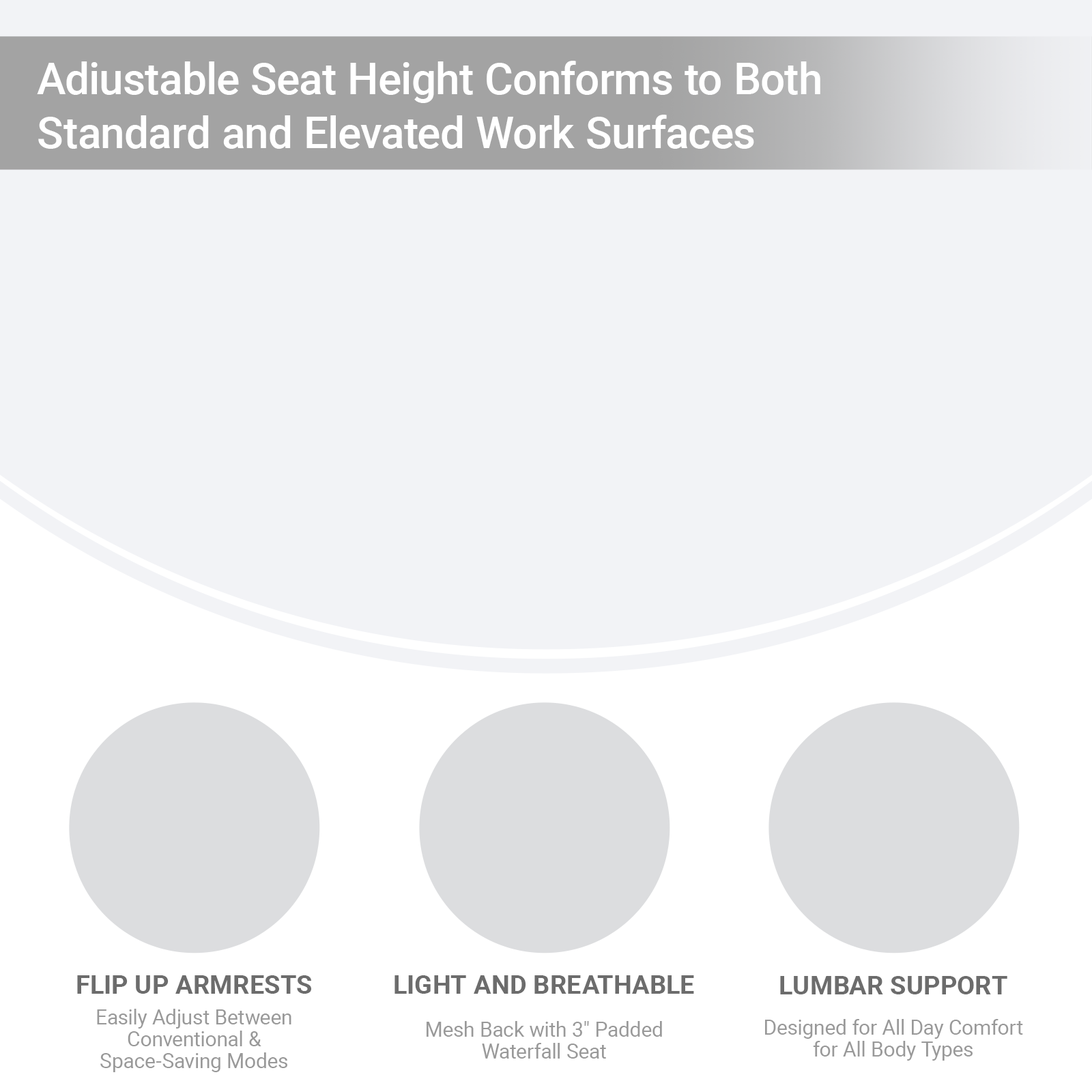
<style>
.page{position:relative;width:1092px;height:1092px;background:#f2f3f6}
.page>*{position:absolute;margin:0}
.t1{font:43.7px/53.9px "Roboto-Medium";color:#ffffff}
.t2{font:26.2px "Roboto-Bold";color:#6c6c6c}
.t3{font:20.4px/21.8px "Roboto-Regular";color:#999999}
</style>
<div class="page">
<p class="t1" style="left:37px;top:61px;width:783px;height:88px">Adiustable Seat Height Conforms to Both<br>Standard and Elevated Work Surfaces</p>
<p class="t2" style="left:77px;top:975px;width:234px;height:19px">FLIP UP ARMRESTS</p>
<p class="t2" style="left:394px;top:975px;width:300px;height:19px">LIGHT AND BREATHABLE</p>
<p class="t2" style="left:780px;top:976px;width:227px;height:18px">LUMBAR SUPPORT</p>
<p class="t3" style="left:97px;top:1009px;width:194px;height:63px;text-align:center">Easily Adjust Between<br>Conventional &amp;<br>Space-Saving Modes</p>
<p class="t3" style="left:427px;top:1021px;width:235px;height:38px;text-align:center">Mesh Back with 3" Padded<br>Waterfall Seat</p>
<p class="t3" style="left:765px;top:1019px;width:258px;height:42px;text-align:center">Designed for All Day Comfort<br>for All Body Types</p>
</div>
